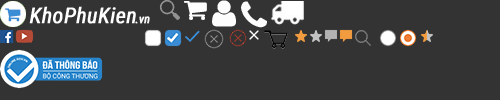
<style>
.page{position:relative;width:500px;height:100px;background:#333333}
.page>*{position:absolute;margin:0}
.t1{font:21.7px "RobotoCondensed-Italic";color:#ffffff;font-weight:bold}
.t2{font:11.9px "RobotoCondensed-Italic";color:#ffffff;font-weight:bold}
</style>
<div class="page">
<p class="t1" style="left:29px;top:6px;width:107px;height:18px">KhoPhuKien</p>
<p class="t2" style="left:135px;top:16px;width:15px;height:8px">.vn</p>
</div>
